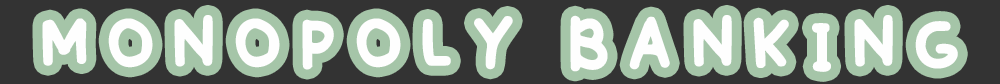
<style>
.page{position:relative;width:1000px;height:84px;background:#333333}
.page>*{position:absolute;margin:0}
.t1{font:90px "Winkle-Regular";letter-spacing:0.15em;color:#fefefe}
</style>
<div class="page">
<p class="t1" style="left:42px;top:15px;width:916px;height:57px">MONOPOLY BANKING</p>
</div>
